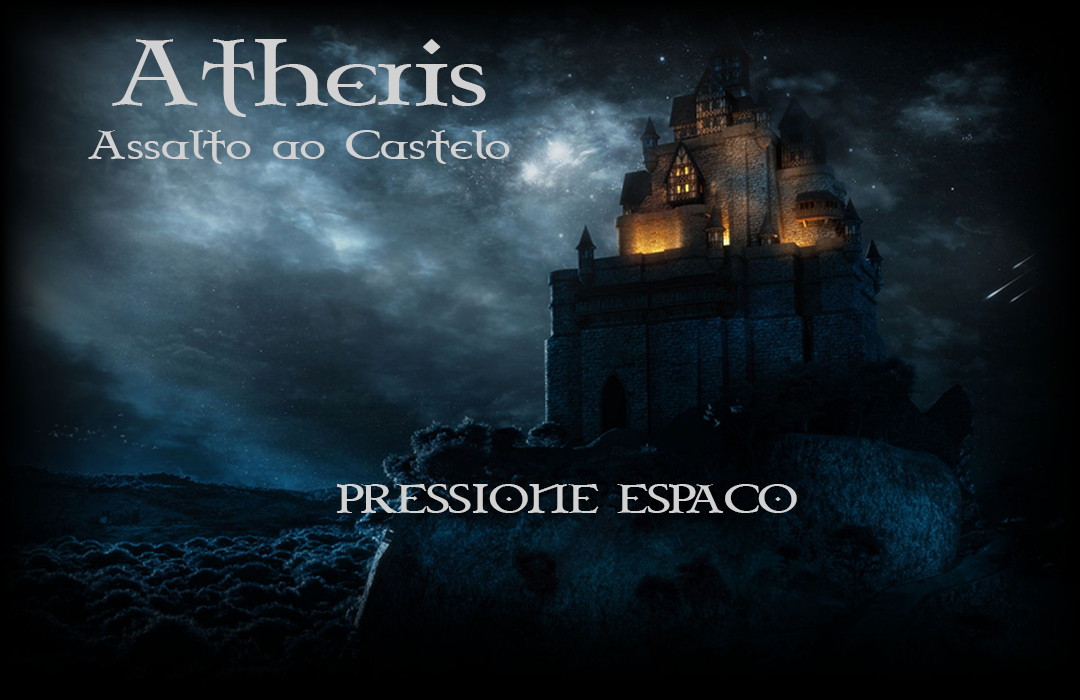
<style>
.page{position:relative;width:1080px;height:700px}
.page>*{position:absolute;margin:0}
.t1{font:81.7px "CelticGaramondthe2nd";color:#d2d2d2;scale:1.16 1}
.t2{font:35px "CelticGaramondthe2nd";color:#d2d2d2;scale:1.16 1}
</style>
<div class="page">
<p class="t1" style="left:112px;top:39px;width:374px;height:78px">Atheris</p>
<p class="t2" style="left:88px;top:130px;width:422px;height:34px">Assalto ao Castelo</p>
<p class="t2" style="left:337px;top:484px;width:460px;height:29px">PRESSIONE ESPACO</p>
</div>
